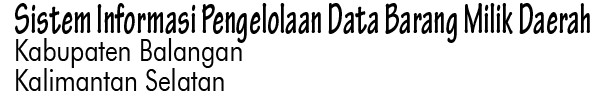
<style>
.page{position:relative;width:600px;height:100px;background:#ffffff}
.page>*{position:absolute;margin:0}
.t1{font:45.5px "TektonPro-BoldCond";color:#000000;scale:0.71 1}
.t2{font:30.3px "FuturaBT-Book";color:#000000;scale:0.82 1}
</style>
<div class="page">
<p class="t1" style="left:15px;top:3px;width:575px;height:40px">Sistem Informasi Pengelolaan Data Barang Milik Daerah</p>
<p class="t2" style="left:16px;top:38px;width:226px;height:30px">Kabupaten Balangan</p>
<p class="t2" style="left:16px;top:68px;width:208px;height:23px">Kalimantan Selatan</p>
</div>
